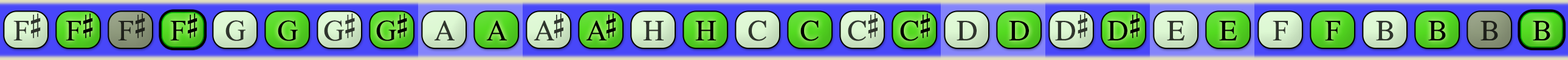
<style>
.page{position:relative;width:1568px;height:60px}
.page>*{position:absolute;margin:0}
.t1{font:29.2px "OpusChords";color:#30352d}
.t2{font:29.2px "OpusChords";color:#000000}
.t3{font:29.2px "OpusChords";color:#1f211b}
.t4{font:29.2px "OpusChords";letter-spacing:-0.025em;color:#2f352d}
.t5{font:29.2px "OpusChords";letter-spacing:-0.025em;color:#000000}
.t6{font:29.2px "OpusChords";letter-spacing:-0.1em;color:#2f352d}
.t7{font:29.2px "OpusChords";letter-spacing:-0.1em;color:#000000}
.t8{font:29.2px "OpusChords";color:#2f352d}
.t9{font:29.2px "OpusChords";color:#30362e}
</style>
<div class="page">
<p class="t1" style="left:13px;top:13px;width:28px;height:27px">F#</p>
<p class="t2" style="left:66px;top:13px;width:27px;height:27px">F#</p>
<p class="t3" style="left:118px;top:13px;width:27px;height:27px">F#</p>
<p class="t2" style="left:170px;top:13px;width:28px;height:27px">F#</p>
<p class="t4" style="left:324px;top:13px;width:31px;height:28px">G#</p>
<p class="t5" style="left:376px;top:13px;width:31px;height:28px">G#</p>
<p class="t6" style="left:534px;top:13px;width:29px;height:27px">A#</p>
<p class="t7" style="left:586px;top:13px;width:30px;height:27px">A#</p>
<p class="t8" style="left:848px;top:13px;width:30px;height:28px">C#</p>
<p class="t2" style="left:900px;top:13px;width:30px;height:28px">C#</p>
<p class="t8" style="left:1055px;top:13px;width:32px;height:27px">D#</p>
<p class="t2" style="left:1107px;top:13px;width:33px;height:27px">D#</p>
<p class="t8" style="left:225px;top:20px;width:21px;height:21px">G</p>
<p class="t2" style="left:278px;top:20px;width:20px;height:21px">G</p>
<p class="t8" style="left:434px;top:20px;width:21px;height:20px">A</p>
<p class="t2" style="left:486px;top:20px;width:21px;height:20px">A</p>
<p class="t1" style="left:643px;top:21px;width:21px;height:19px">H</p>
<p class="t2" style="left:695px;top:21px;width:21px;height:19px">H</p>
<p class="t9" style="left:748px;top:20px;width:18px;height:21px">C</p>
<p class="t2" style="left:800px;top:20px;width:19px;height:21px">C</p>
<p class="t8" style="left:957px;top:21px;width:20px;height:19px">D</p>
<p class="t2" style="left:1009px;top:21px;width:20px;height:19px">D</p>
<p class="t9" style="left:1167px;top:21px;width:18px;height:19px">E</p>
<p class="t2" style="left:1219px;top:21px;width:18px;height:19px">E</p>
<p class="t9" style="left:1273px;top:21px;width:15px;height:19px">F</p>
<p class="t2" style="left:1325px;top:21px;width:15px;height:19px">F</p>
<p class="t1" style="left:1376px;top:21px;width:18px;height:19px">B</p>
<p class="t2" style="left:1428px;top:21px;width:18px;height:19px">B</p>
<p class="t3" style="left:1480px;top:21px;width:18px;height:19px">B</p>
<p class="t2" style="left:1533px;top:21px;width:17px;height:19px">B</p>
</div>
